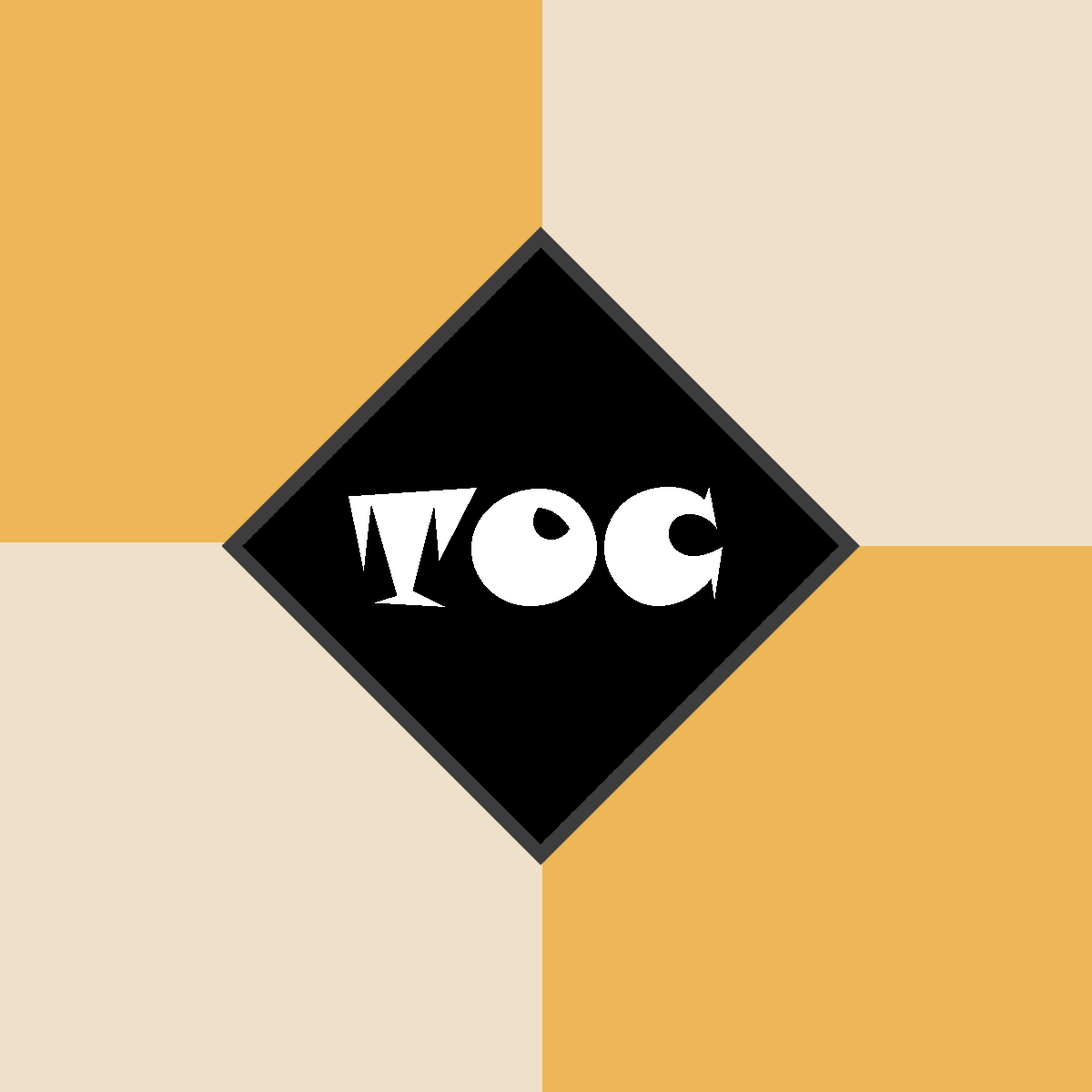
<style>
.page{position:relative;width:1092px;height:1092px;background:#eee0ca}
.page>*{position:absolute;margin:0}
.t1{font:158.9px "SnapITC-Regular";color:#ffffff}
</style>
<div class="page">
<p class="t1" style="left:349px;top:487px;width:374px;height:120px">TOC</p>
</div>
